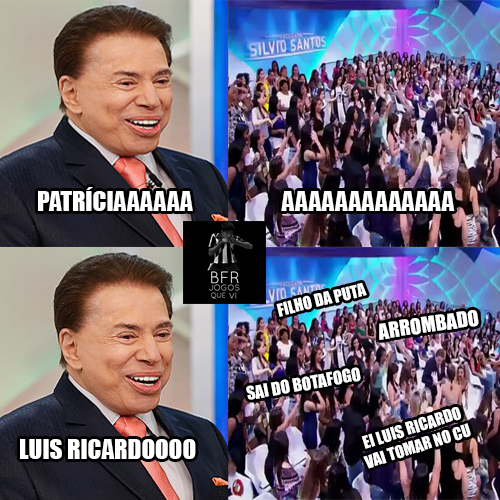
<style>
.page{position:relative;width:500px;height:500px}
.page>*{position:absolute;margin:0}
.t1{font:25px "Impact";color:#ffffff}
.t2{font:16.5px "Impact";color:#ffffff}
.t3{font:20.2px "Impact";color:#ffffff}
.t4{font:17px "Impact";color:#ffffff}
.t5{font:16.2px "Impact";color:#ffffff}
</style>
<div class="page">
<p class="t1" style="left:38px;top:187px;width:155px;height:24px">PATRÍCIAAAAAA</p>
<p class="t1" style="left:281px;top:191px;width:174px;height:20px">AAAAAAAAAAAAA</p>
<p class="t2" style="left:276px;top:282px;width:91px;height:35px;rotate:-14deg">FILHO DA PUTA</p>
<p class="t3" style="left:379px;top:310px;width:100px;height:30px;rotate:-8deg">ARROMBADO</p>
<p class="t4" style="left:246px;top:367px;width:115px;height:33px;rotate:-10deg">SAI DO BOTAFOGO</p>
<p class="t5" style="left:361px;top:407px;width:110px;height:62px;text-align:center;rotate:-17deg">EI LUIS RICARDO<br>VAI TOMAR NO CU</p>
<p class="t1" style="left:20px;top:439px;width:176px;height:20px">LUIS RICARDOOOO</p>
</div>
